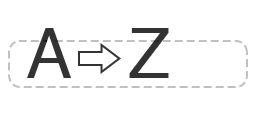
<style>
.page{position:relative;width:256px;height:128px;background:#ffffff}
.page>*{position:absolute;margin:0}
.t1{font:68.9px "Helvetica";color:#333333}
</style>
<div class="page">
<p class="t1" style="left:27px;top:28px;width:44px;height:50px">A</p>
<p class="t1" style="left:129px;top:28px;width:40px;height:50px">Z</p>
</div>
